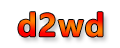
<style>
.page{position:relative;width:120px;height:48px;background:#ffffff}
.page>*{position:absolute;margin:0}
.t1{font:30px "MicrosoftYaHei-Bold";letter-spacing:0.04em}
</style>
<div class="page">
<p class="t1" style="left:18px;top:12px;width:85px;height:25px">d2wd</p>
</div>
